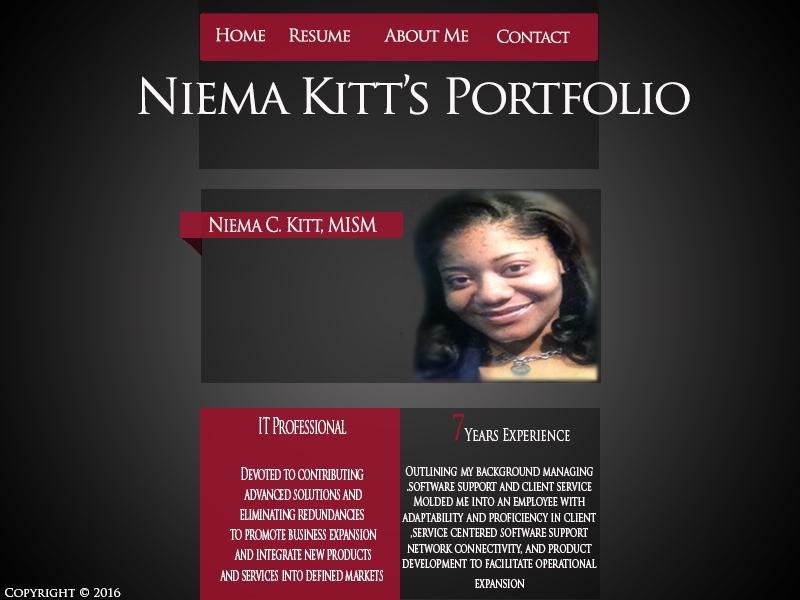
<style>
.page{position:relative;width:800px;height:600px}
.page>*{position:absolute;margin:0}
.t1{font:17px "TrajanPro-Regular";letter-spacing:-0.06em;color:#fbf6f8}
.t2{font:16.7px "TrajanPro-Regular";letter-spacing:-0.06em;color:#fbf6f8}
.t3{font:48px "TrajanPro-Regular";letter-spacing:-0.06em;color:#fbf6f8}
.t4{font:19.4px "TrajanPro-Regular";letter-spacing:-0.06em;color:#fdf4f7;scale:0.87 1}
.t5{font:12.8px "TrajanPro-Regular";letter-spacing:-0.01em;color:#fdf7f9;scale:0.7 1}
.t6{font:35px "TrajanPro-Regular";letter-spacing:-0.01em;color:#a0142e;scale:0.7 1}
.t7{font:16.4px "TrajanPro-Regular";letter-spacing:-0.01em;color:#fdf7f9;scale:0.7 1}
.t8{font:16.8px "TrajanPro-Regular";letter-spacing:-0.03em;color:#ffffff;scale:0.52 1}
.t9{font:21.4px "TrajanPro-Regular";letter-spacing:-0.06em;color:#ffffff;scale:0.52 1}
.t10{font:12px "TrajanPro-Regular";letter-spacing:-0.01em;color:#ffffff}
</style>
<div class="page">
<p class="t1" style="left:216px;top:28px;width:49px;height:14px">Home</p>
<p class="t1" style="left:289px;top:28px;width:61px;height:14px">Resume</p>
<p class="t1" style="left:384px;top:28px;width:85px;height:14px">About Me</p>
<p class="t2" style="left:497px;top:29px;width:73px;height:14px">Contact</p>
<p class="t3" style="left:138px;top:74px;width:552px;height:41px">Niema Kitt’s Portfolio</p>
<p class="t4" style="left:209px;top:216px;width:168px;height:18px">Niema C. Kitt, MISM</p>
<p class="t5" style="left:402px;top:414px;width:195px;height:174px;text-align:center"><span class="t6">7</span><span class="t7">Years Experience       <br><br></span>Outlining my background managing <br>software support and client service. <br>Molded me into an employee with <br>adaptability and proficiency in client <br>service centered software support, <br>network connectivity, and product <br>development to facilitate operational <br>expansion</p>
<p class="t8" style="left:220px;top:416px;width:163px;height:165px;text-align:center"><span class="t9">IT Professional<br>       <br></span>Devoted to contributing<br>advanced solutions and <br>eliminating redundancies<br>to promote business expansion <br>and integrate new products <br>and services into defined markets</p>
<p class="t10" style="left:5px;top:588px;width:116px;height:9px">Copyright © 2016</p>
</div>
